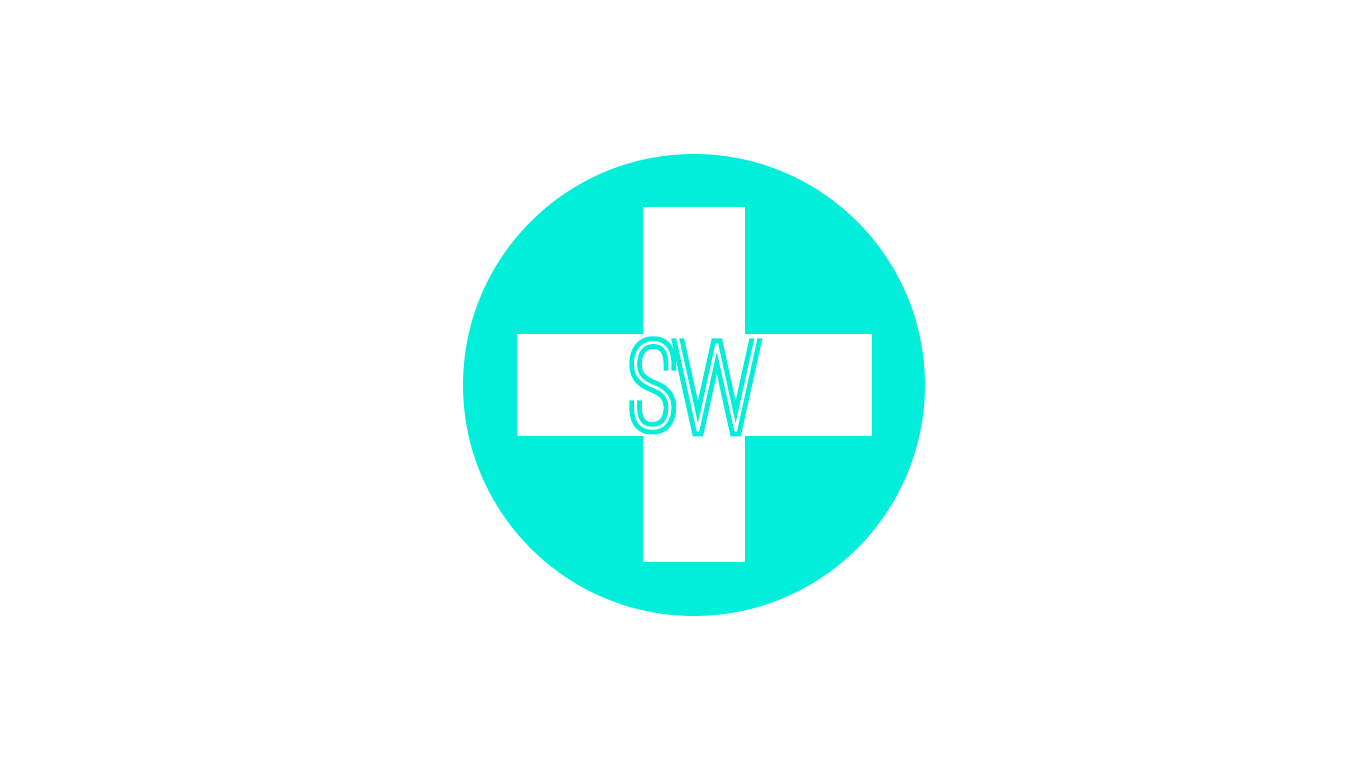
<style>
.page{position:relative;width:1366px;height:768px;background:#ffffff}
.page>*{position:absolute;margin:0}
.t1{font:133.3px "OstrichSans-Bold";color:#00eeda}
</style>
<div class="page">
<p class="t1" style="left:629px;top:336px;width:48px;height:99px">S</p>
<p class="t1" style="left:671px;top:338px;width:92px;height:99px">W</p>
</div>
